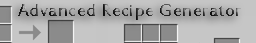
<style>
.page{position:relative;width:256px;height:43px}
.page>*{position:absolute;margin:0}
.t1{font:19px "EstrangeloEdessa";letter-spacing:0.025em}
</style>
<div class="page">
<p class="t1" style="left:18px;top:4px;width:223px;height:16px">Advanced Recipe Generator</p>
</div>
